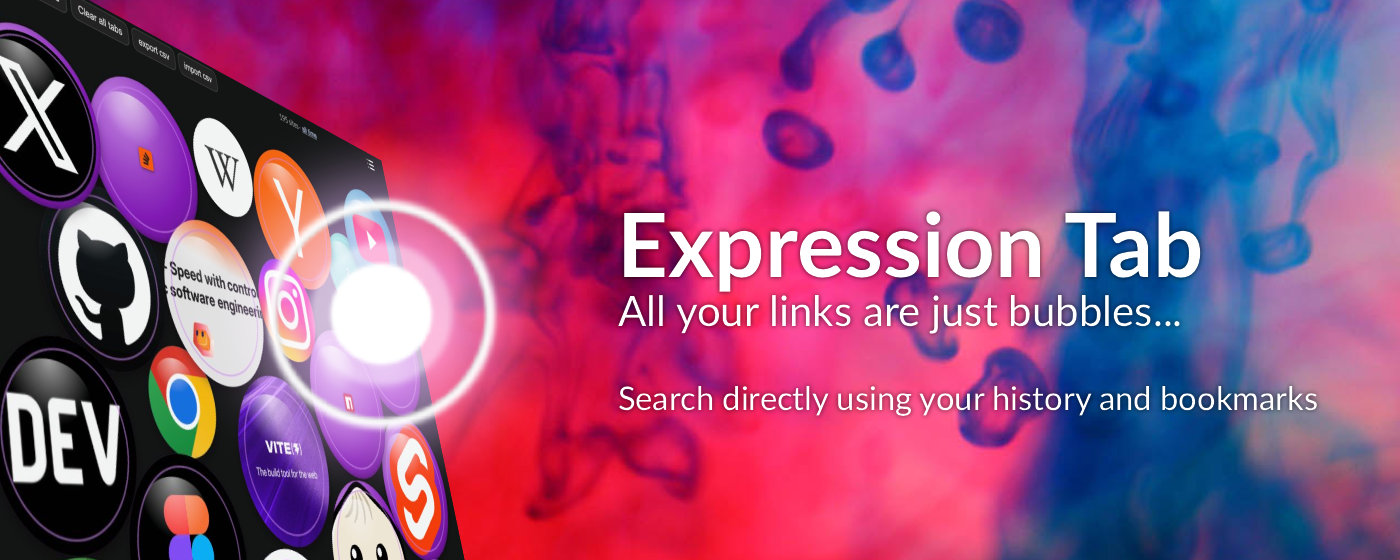
<style>
.page{position:relative;width:1400px;height:560px}
.page>*{position:absolute;margin:0}
.t1{font:88.7px "Lato-Bold";color:#ffffff}
.t2{font:42px "Lato-Regular";color:#ffffff}
.t3{font:32.7px "Lato-Regular";color:#ffffff}
</style>
<div class="page">
<p class="t1" style="left:624px;top:211px;width:577px;height:81px">Expression Tab</p>
<p class="t2" style="left:618px;top:295px;width:562px;height:39px">All your links are just bubbles...</p>
<p class="t3" style="left:619px;top:385px;width:698px;height:31px">Search directly using your history and bookmarks</p>
</div>
